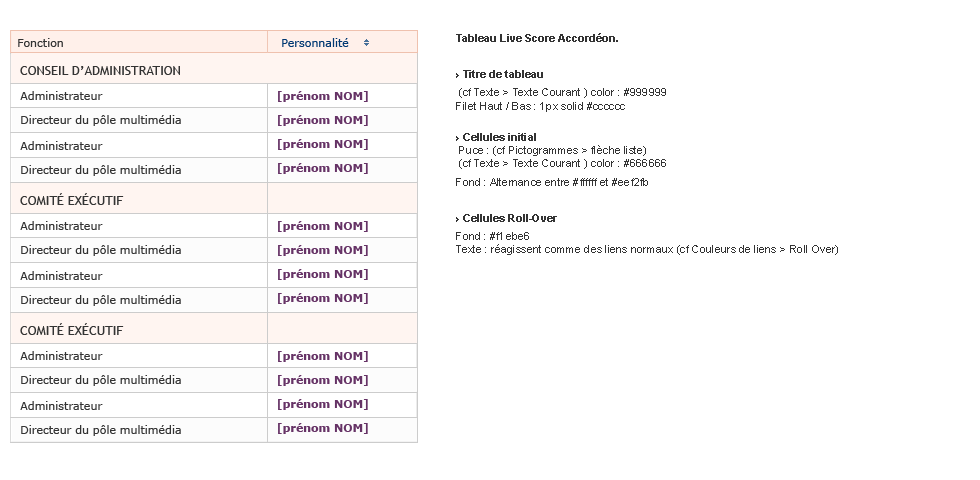
<style>
.page{position:relative;width:980px;height:480px;background:#ffffff}
.page>*{position:absolute;margin:0}
.t1{font:11px "Verdana";color:#333333}
.t2{font:11px "Verdana";color:#003872}
.t3{font:11px "ArialMT";color:#333333}
.t4{font:11px "Arial-BoldMT";color:#333333}
.t5{font:13px "TrebuchetMS";color:#333333;text-transform:uppercase}
.t6{font:11px/24px "Verdana-Bold";color:#663366}
</style>
<div class="page">
<p class="t1" style="left:18px;top:38px;width:45px;height:9px">Fonction</p>
<p class="t2" style="left:282px;top:38px;width:67px;height:9px">Personnalité</p>
<p class="t3" style="left:456px;top:33px;width:382px;height:222px"><span class="t4">Tableau Live Score Accordéon.<br><br>› Titre de tableau<br></span> (cf Texte &gt; Texte Courant ) color : #999999<br>Filet Haut / Bas : 1px solid #cccccc <br><span class="t4"><br>› Cellules initial<br></span> Puce : (cf Pictogrammes &gt; flèche liste)<br> (cf Texte &gt; Texte Courant ) color : #666666<br>Fond : Alternance entre #ffffff et #eef2fb <br><br><span class="t4">› Cellules Roll-Over<br></span>Fond : #f1ebe6<br>Texte : réagissent comme des liens normaux (cf Couleurs de liens &gt; Roll Over)</p>
<p class="t5" style="left:20px;top:66px;width:160px;height:9px">Conseil d’administration</p>
<p class="t1" style="left:20px;top:91px;width:83px;height:9px">Administrateur</p>
<p class="t6" style="left:278px;top:91px;width:90px;height:83px">[prénom NOM]<br>[prénom NOM]<br>[prénom NOM]<br>[prénom NOM]</p>
<p class="t1" style="left:21px;top:115px;width:160px;height:11px">Directeur du pôle multimédia</p>
<p class="t1" style="left:20px;top:141px;width:83px;height:9px">Administrateur</p>
<p class="t1" style="left:21px;top:165px;width:160px;height:11px">Directeur du pôle multimédia</p>
<p class="t5" style="left:20px;top:193px;width:104px;height:12px">Comité exécutif</p>
<p class="t1" style="left:20px;top:221px;width:83px;height:9px">Administrateur</p>
<p class="t6" style="left:278px;top:221px;width:90px;height:83px">[prénom NOM]<br>[prénom NOM]<br>[prénom NOM]<br>[prénom NOM]</p>
<p class="t1" style="left:21px;top:245px;width:160px;height:11px">Directeur du pôle multimédia</p>
<p class="t1" style="left:20px;top:271px;width:83px;height:9px">Administrateur</p>
<p class="t1" style="left:21px;top:295px;width:160px;height:11px">Directeur du pôle multimédia</p>
<p class="t5" style="left:20px;top:323px;width:104px;height:12px">Comité exécutif</p>
<p class="t1" style="left:20px;top:351px;width:83px;height:9px">Administrateur</p>
<p class="t6" style="left:278px;top:351px;width:90px;height:83px">[prénom NOM]<br>[prénom NOM]<br>[prénom NOM]<br>[prénom NOM]</p>
<p class="t1" style="left:21px;top:375px;width:160px;height:11px">Directeur du pôle multimédia</p>
<p class="t1" style="left:20px;top:401px;width:83px;height:9px">Administrateur</p>
<p class="t1" style="left:21px;top:425px;width:160px;height:11px">Directeur du pôle multimédia</p>
</div>
